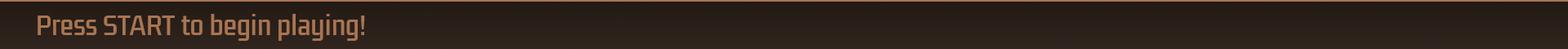
<style>
.page{position:relative;width:1568px;height:49px}
.page>*{position:absolute;margin:0}
.t1{font:24.5px "KdamThmorPro-Regular";color:#a97553}
</style>
<div class="page">
<p class="t1" style="left:38px;top:14px;width:327px;height:27px">Press START to begin playing!</p>
</div>
